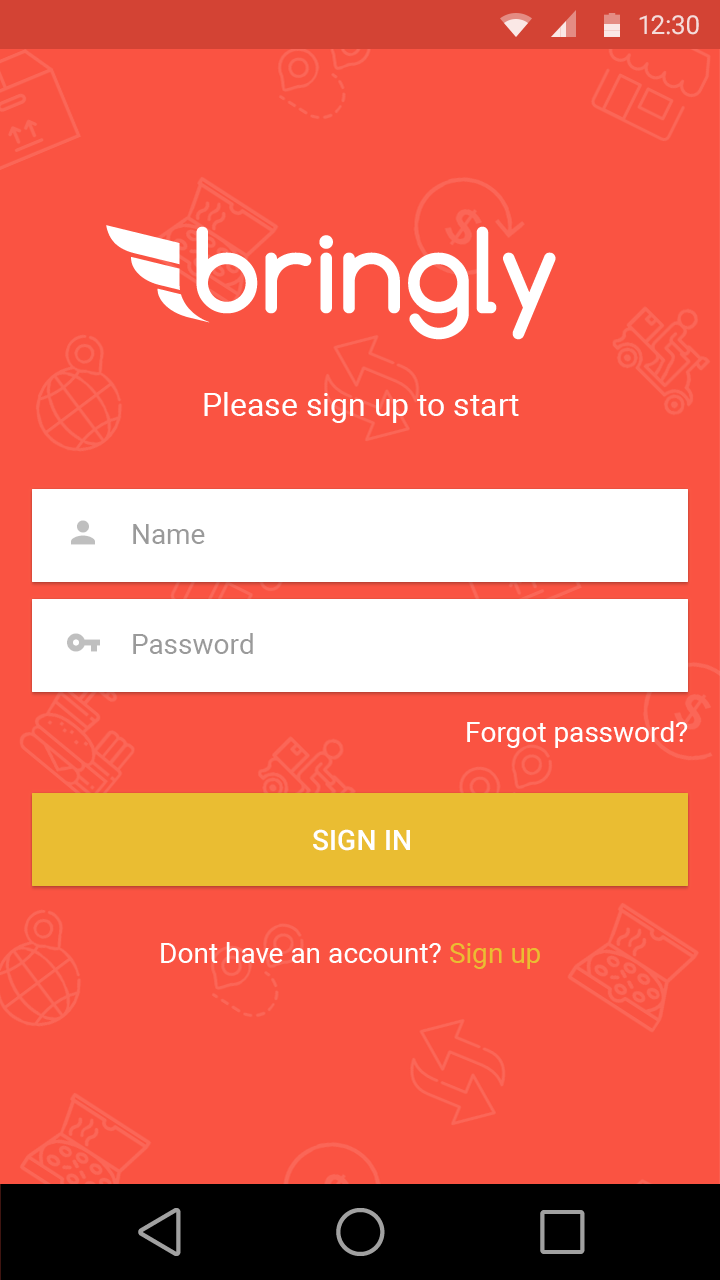
<style>
.page{position:relative;width:720px;height:1280px;background:#fa5342}
.page>*{position:absolute;margin:0}
.t1{font:26px "Roboto-Regular";color:#f5dcda}
.t2{font:32px "Roboto-Regular";color:#ffffff}
.t3{font:28px "Roboto-Regular";color:#9a9a9a}
.t4{font:28px "Roboto-Regular";color:#fefefe}
.t5{font:28px "Roboto-Medium";letter-spacing:0.01em;color:#ffffff;text-transform:uppercase}
.t6{font:28px "Roboto-Regular";color:#eabd32}
</style>
<div class="page">
<p class="t1" style="left:639px;top:15px;width:60px;height:20px">12:30</p>
<p class="t2" style="left:204px;top:392px;width:315px;height:31px">Please sign up to start</p>
<p class="t3" style="left:133px;top:524px;width:72px;height:20px">Name</p>
<p class="t3" style="left:133px;top:633px;width:120px;height:21px">Password</p>
<p class="t4" style="left:467px;top:721px;width:221px;height:27px">Forgot password?</p>
<p class="t5" style="left:313px;top:829px;width:97px;height:22px">Sign In</p>
<p class="t4" style="left:161px;top:942px;width:379px;height:27px">Dont have an account? <span class="t6">Sign up</span></p>
</div>
